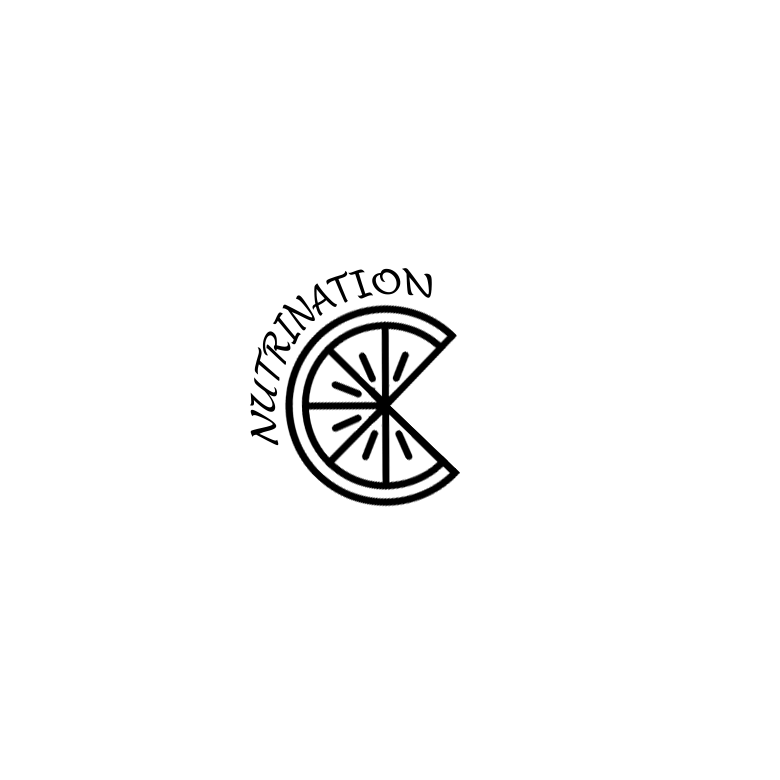
<style>
.page{position:relative;width:780px;height:780px;background:#ffffff}
.page>*{position:absolute;margin:0}
.t1{font:38.9px "LucidaHandwriting-Italic";color:#000000;scale:0.65 1}
</style>
<div class="page">
<p class="t1" style="left:249px;top:268px;width:183px;height:178px;rotate:-44deg">NUTRINATION</p>
</div>
